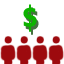
<style>
.page{position:relative;width:64px;height:64px;background:#ffffff}
.page>*{position:absolute;margin:0}
.t1{font:28.8px "Tahoma-Bold";color:#0db200;font-variant:small-caps;scale:0.83 1}
</style>
<div class="page">
<p class="t1" style="left:23px;top:4px;width:14px;height:28px">$</p>
</div>
